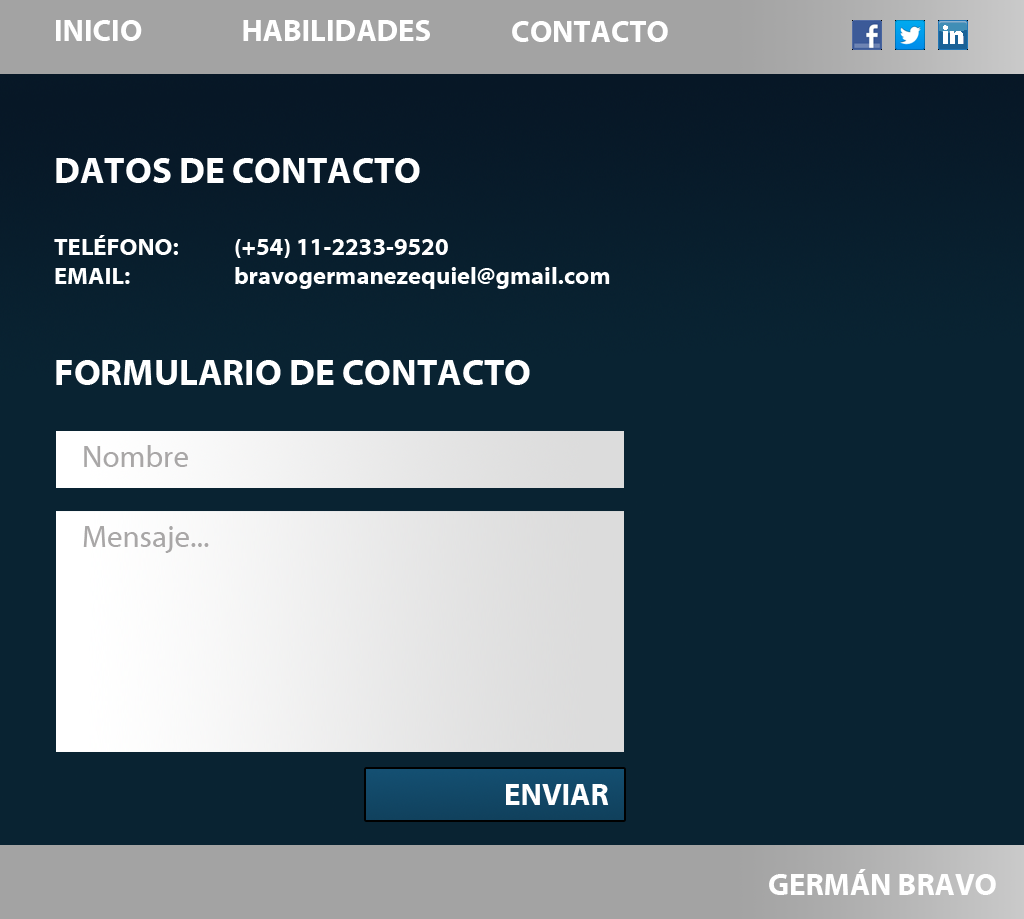
<style>
.page{position:relative;width:1024px;height:919px;background:#092332}
.page>*{position:absolute;margin:0}
.t1{font:30px "MyriadWebPro-Bold";color:#ffffff}
.t2{font:24px "MyriadWebPro-Bold";color:#ffffff}
.t3{font:36px "MyriadWebPro-Bold";color:#ffffff}
.t4{font:30px "MyriadWebPro";color:#a9a7a7}
</style>
<div class="page">
<p class="t1" style="left:56px;top:20px;width:86px;height:21px">INICIO</p>
<p class="t1" style="left:243px;top:20px;width:187px;height:21px">HABILIDADES</p>
<p class="t1" style="left:512px;top:21px;width:156px;height:21px">CONTACTO</p>
<p class="t2" style="left:54px;top:158px;width:556px;height:131px"><span class="t3">DATOS DE CONTACTO<br><br></span>TELÉFONO:   (+54) 11-2233-9520<br>EMAIL:   bravogermanezequiel@gmail.com</p>
<p class="t3" style="left:56px;top:360px;width:474px;height:25px">FORMULARIO DE CONTACTO</p>
<p class="t4" style="left:84px;top:445px;width:104px;height:22px">Nombre</p>
<p class="t4" style="left:83px;top:526px;width:126px;height:27px">Mensaje...</p>
<p class="t1" style="left:506px;top:784px;width:103px;height:21px">ENVIAR</p>
<p class="t1" style="left:769px;top:869px;width:227px;height:26px">GERMÁN BRAVO</p>
</div>
